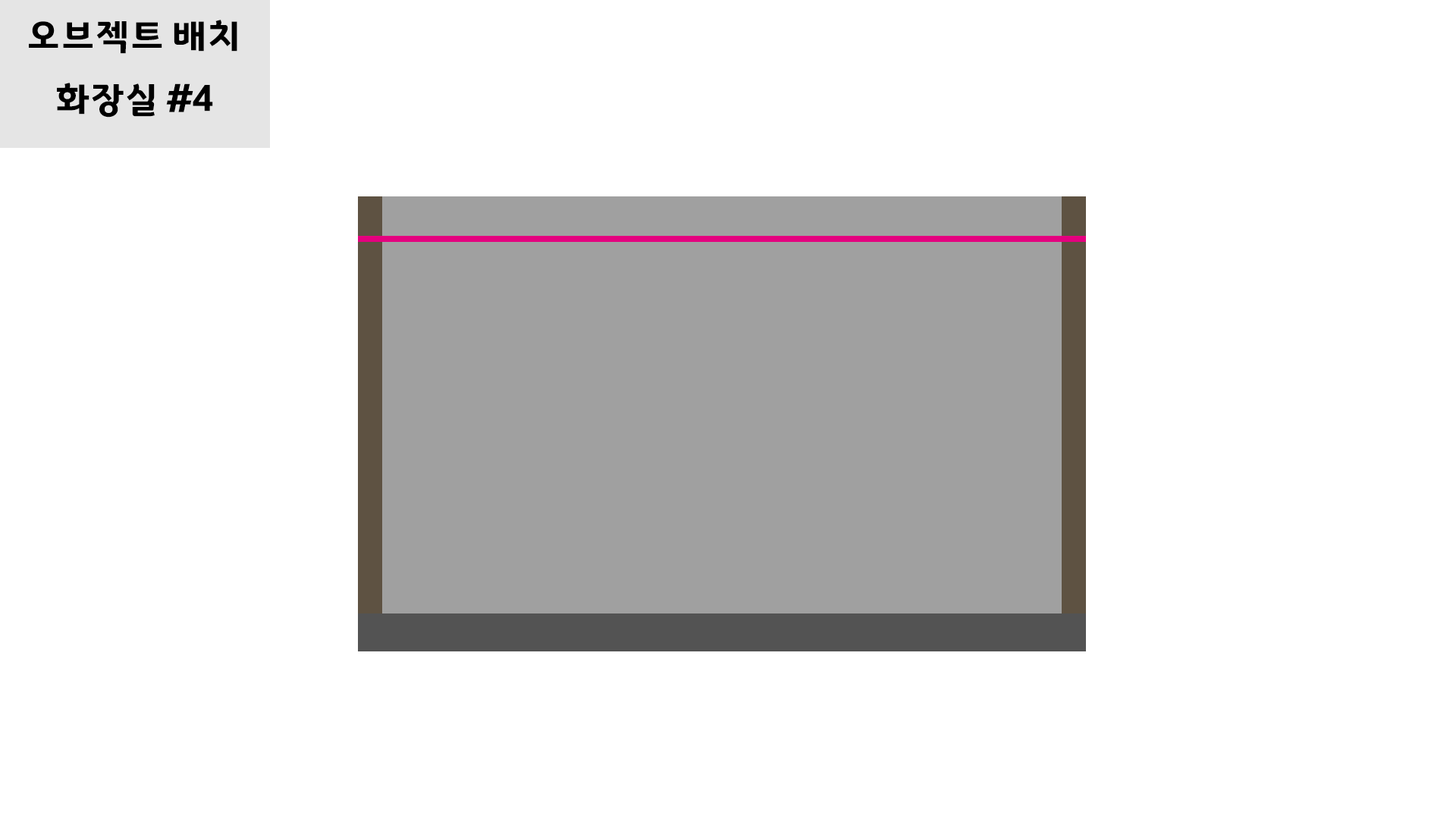
<style>
.page{position:relative;width:1456px;height:819px;background:#ffffff}
.page>*{position:absolute;margin:0}
.t1{font:36.4px "GyeonggiTitleV";letter-spacing:-0.05em;color:#000000}
</style>
<div class="page">
<p class="t1" style="left:29px;top:20px;width:208px;height:34px">오브젝트 배치</p>
<p class="t1" style="left:57px;top:83px;width:156px;height:35px">화장실 #4</p>
</div>
